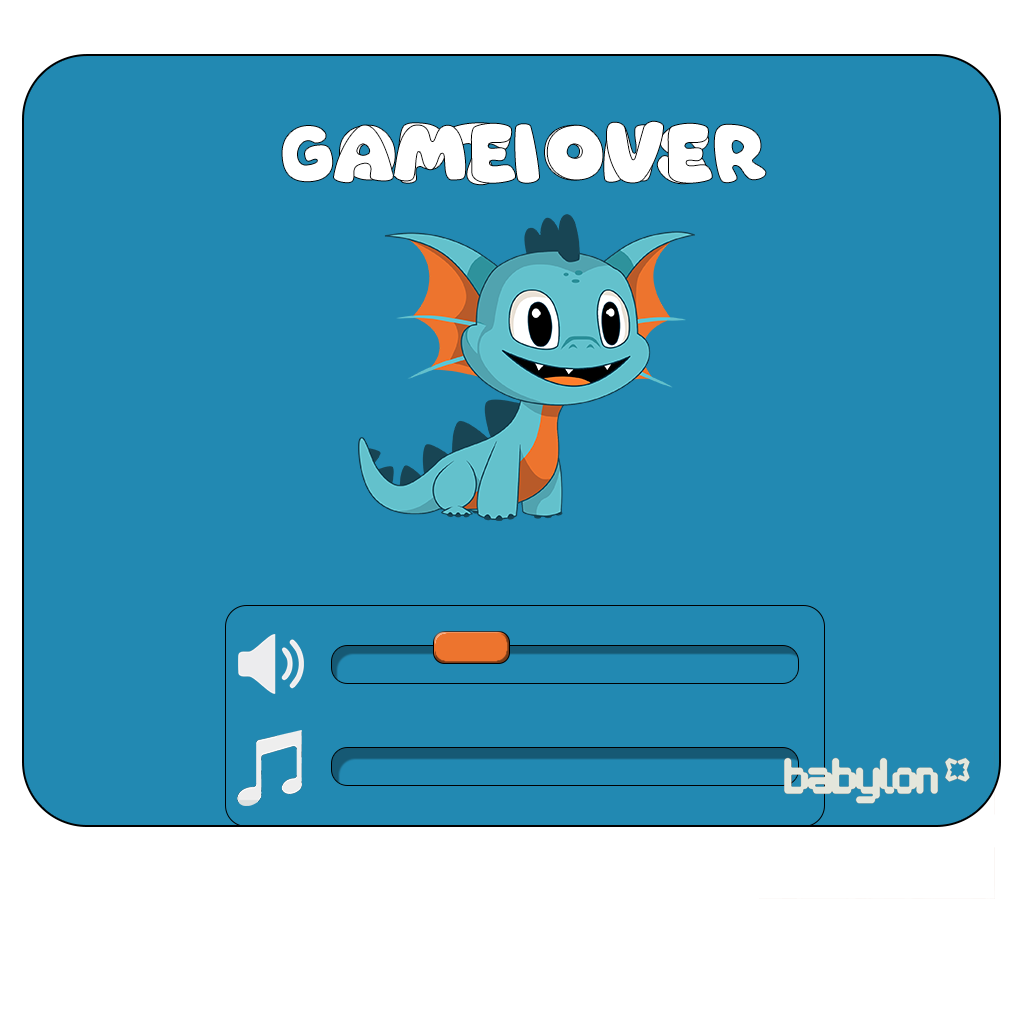
<style>
.page{position:relative;width:1024px;height:1024px;background:#2289b2}
.page>*{position:absolute;margin:0}
.t1{font:72px "SuperBubble";color:#ffffff}
</style>
<div class="page">
<p class="t1" style="left:281px;top:120px;width:486px;height:64px">GAME OVER</p>
<p class="t1" style="left:339px;top:122px;width:371px;height:64px">OPTIONS</p>
</div>
